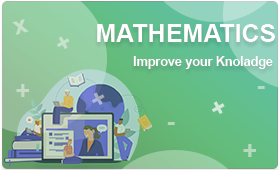
<style>
.page{position:relative;width:280px;height:170px}
.page>*{position:absolute;margin:0}
.t1{font:25px "Arial-BoldMT";color:#c6e2cb}
.t2{font:25px "Arial-BoldMT";color:#ffffff}
.t3{font:25px "Arial-BoldMT";color:#c6e3cc}
.t4{font:12.5px "Arial-BoldMT";color:#ffffff}
.t5{font:25px "Arial-BoldMT";color:#c6dcc7}
.t6{font:25px "Arial-BoldMT";color:#b2dac8}
.t7{font:25px "Arial-BoldMT";color:#a8b0ca}
.t8{font:25px "Arial-BoldMT";color:#d4e9db}
.t9{font:25px "Arial-BoldMT";color:#b4d8ba}
.t10{font:25px "Arial-BoldMT";color:#b4dabd}
</style>
<div class="page">
<p class="t1" style="left:12px;top:19px;width:17px;height:16px;rotate:-16deg">x</p>
<p class="t2" style="left:97px;top:24px;width:178px;height:18px">MATHEMATICS</p>
<p class="t3" style="left:57px;top:36px;width:13px;height:13px;rotate:-29deg">+</p>
<p class="t4" style="left:133px;top:56px;width:140px;height:13px">Improve your Knoladge</p>
<p class="t5" style="left:16px;top:84px;width:13px;height:13px">+</p>
<p class="t6" style="left:257px;top:86px;width:8px;height:3px">-</p>
<p class="t7" style="left:92px;top:92px;width:13px;height:13px;rotate:-29deg">+</p>
<p class="t8" style="left:212px;top:101px;width:13px;height:13px;rotate:-29deg">+</p>
<p class="t8" style="left:212px;top:101px;width:13px;height:13px;rotate:-29deg">+</p>
<p class="t9" style="left:167px;top:122px;width:8px;height:3px">-</p>
<p class="t10" style="left:243px;top:144px;width:13px;height:13px">+</p>
</div>
